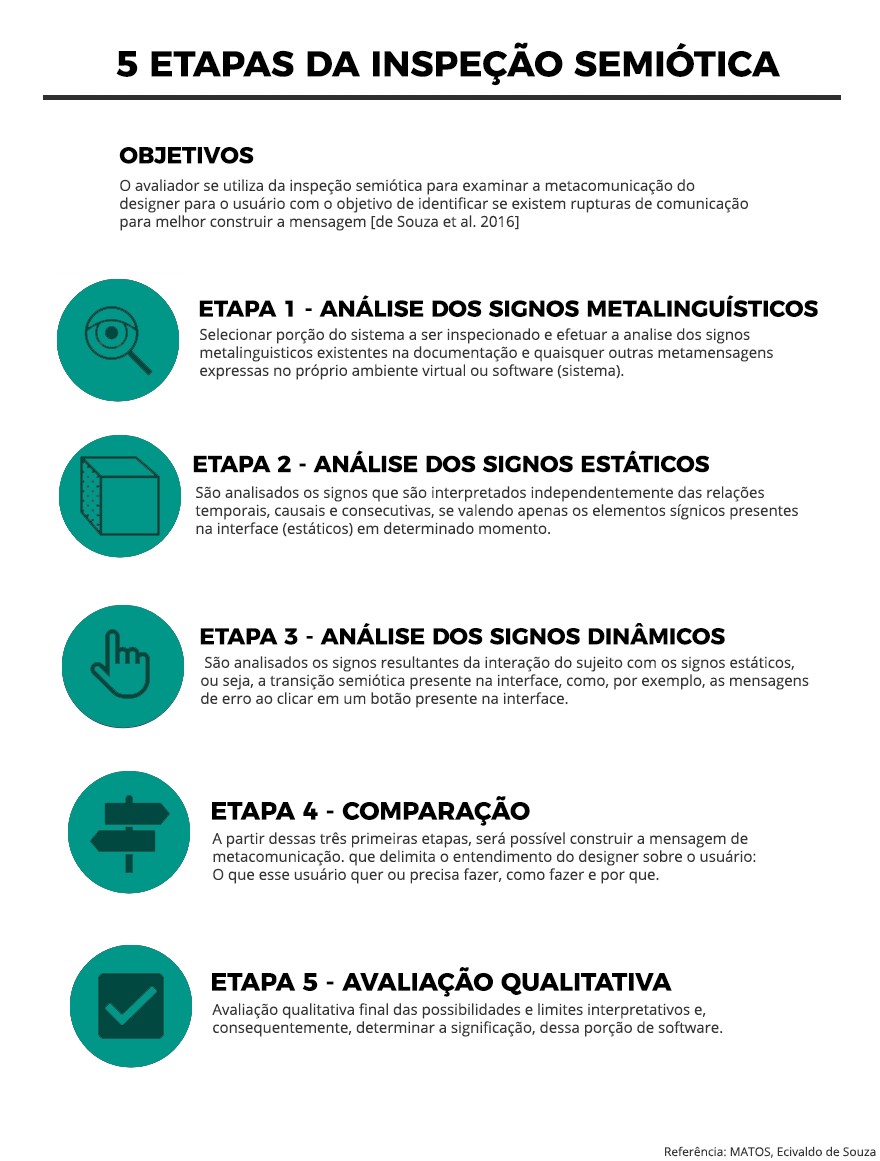
<style>
.page{position:relative;width:880px;height:1161px;background:#ffffff}
.page>*{position:absolute;margin:0}
.t1{font:36px "Montserrat-Bold";color:#000000}
.t2{font:23px "Montserrat-Bold";color:#000000}
.t3{font:15px/18px "OpenSans";color:#353535}
.t4{font:25px "Montserrat-Bold";color:#000000}
.t5{font:12px "OpenSans";color:#353535}
</style>
<div class="page">
<p class="t1" style="left:116px;top:42px;width:665px;height:44px">5 ETAPAS DA INSPEÇÃO SEMIÓTICA</p>
<p class="t2" style="left:119px;top:147px;width:135px;height:17px">OBJETIVOS</p>
<p class="t3" style="left:120px;top:179px;width:628px;height:52px">O avaliador se utiliza da inspeção semiótica para examinar a metacomunicação do <br>designer para o usuário com o objetivo de identificar se existem rupturas de comunicação <br>para melhor construir a mensagem [de Souza et al. 2016]</p>
<p class="t2" style="left:199px;top:295px;width:619px;height:22px">ETAPA 1 - ANÁLISE DOS SIGNOS METALINGUÍSTICOS</p>
<p class="t3" style="left:200px;top:328px;width:573px;height:52px">Selecionar porção do sistema a ser inspecionado e efetuar a analise dos signos <br>metalinguisticos existentes na documentação e quaisquer outras metamensagens <br>expressas no próprio ambiente virtual ou software (sistema).</p>
<p class="t2" style="left:193px;top:450px;width:516px;height:23px">ETAPA 2 - ANÁLISE DOS SIGNOS ESTÁTICOS</p>
<p class="t3" style="left:195px;top:486px;width:603px;height:51px">São analisados os signos que são interpretados independentemente das relações <br>temporais, causais e consecutivas, se valendo apenas os elementos sígnicos presentes <br>na interface (estáticos) em determinado momento.</p>
<p class="t2" style="left:200px;top:622px;width:525px;height:23px">ETAPA 3 - ANÁLISE DOS SIGNOS DINÂMICOS</p>
<p class="t3" style="left:201px;top:656px;width:608px;height:52px">São analisados os signos resultantes da interação do sujeito com os signos estáticos, <br>ou seja, a transição semiótica presente na interface, como, por exemplo, as mensagens <br>de erro ao clicar em um botão presente na interface.</p>
<p class="t4" style="left:212px;top:796px;width:318px;height:30px">ETAPA 4 - COMPARAÇÃO</p>
<p class="t3" style="left:212px;top:832px;width:544px;height:52px">A partir dessas três primeiras etapas, será possível construir a mensagem de <br>metacomunicação. que delimita o entendimento do designer sobre o usuário: <br>O que esse usuário quer ou precisa fazer, como fazer e por que.</p>
<p class="t4" style="left:212px;top:967px;width:460px;height:30px">ETAPA 5 - AVALIAÇÃO QUALITATIVA</p>
<p class="t3" style="left:212px;top:1003px;width:511px;height:34px">Avaliação qualitativa final das possibilidades e limites interpretativos e, <br>consequentemente, determinar a significação, dessa porção de software.</p>
<p class="t5" style="left:665px;top:1146px;width:211px;height:12px">Referência: MATOS, Ecivaldo de Souza</p>
</div>
